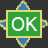
<style>
.page{position:relative;width:48px;height:48px;background:#333333}
.page>*{position:absolute;margin:0}
.t1{font:19.4px "ArialMT";color:#fcfcfc;scale:0.95 1}
</style>
<div class="page">
<p class="t1" style="left:11px;top:17px;width:27px;height:14px">OK</p>
</div>
